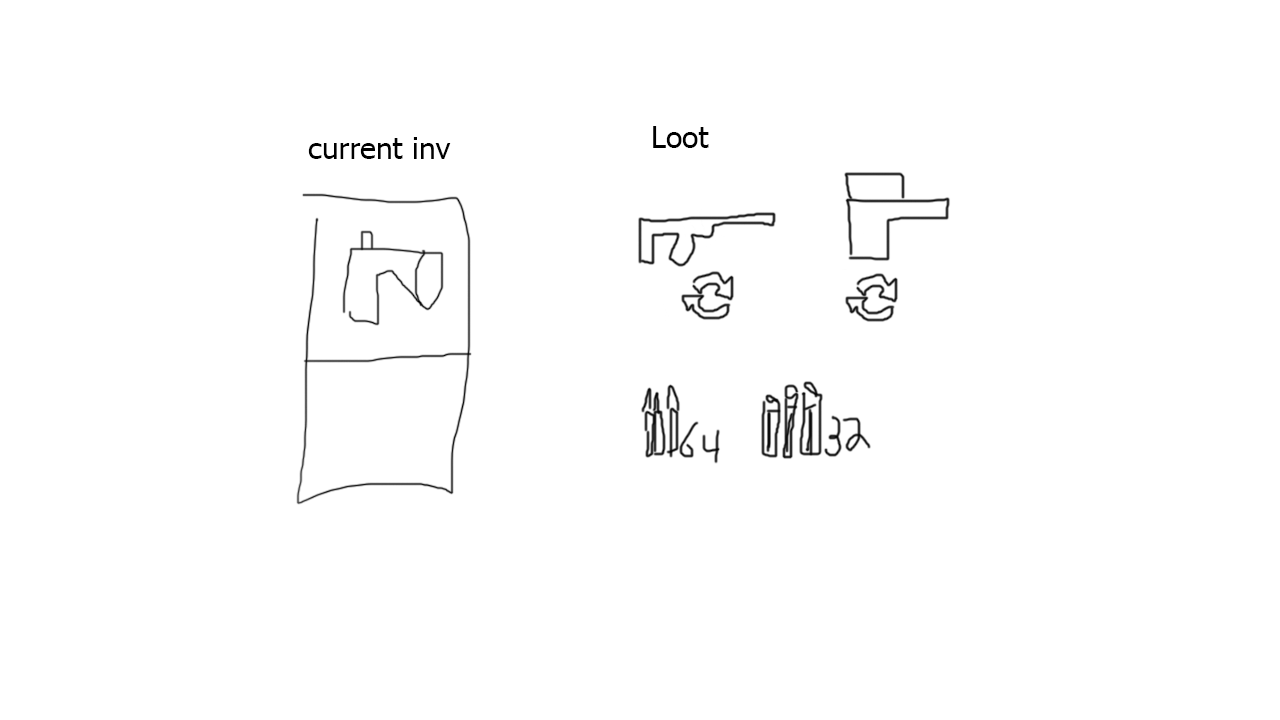
<style>
.page{position:relative;width:1280px;height:720px;background:#ffffff}
.page>*{position:absolute;margin:0}
.t1{font:30px "Tahoma";color:#000000}
</style>
<div class="page">
<p class="t1" style="left:653px;top:126px;width:56px;height:22px">Loot</p>
<p class="t1" style="left:308px;top:137px;width:143px;height:22px">current inv</p>
</div>
